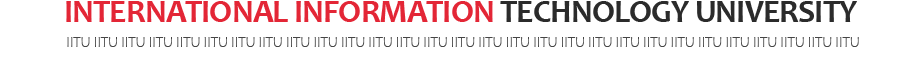
<style>
.page{position:relative;width:922px;height:65px;background:#ffffff}
.page>*{position:absolute;margin:0}
.t1{font:32.8px "Candara-Bold";letter-spacing:-0.025em;color:#e32636}
.t2{font:32.8px "Candara-Bold";letter-spacing:-0.025em;color:#2b2b2b}
.t3{font:15px "Candara-Light";letter-spacing:-0.025em;color:#454545}
</style>
<div class="page">
<p class="t1" style="left:66px;top:1px;width:791px;height:21px">INTERNATIONAL INFORMATION<span class="t2"> TECHNOLOGY UNIVERSITY</span></p>
<p class="t3" style="left:67px;top:37px;width:792px;height:10px">IITU IITU IITU IITU IITU IITU IITU IITU IITU IITU IITU IITU IITU IITU IITU IITU IITU IITU IITU IITU IITU IITU IITU IITU IITU IITU IITU IITU IITU</p>
</div>
